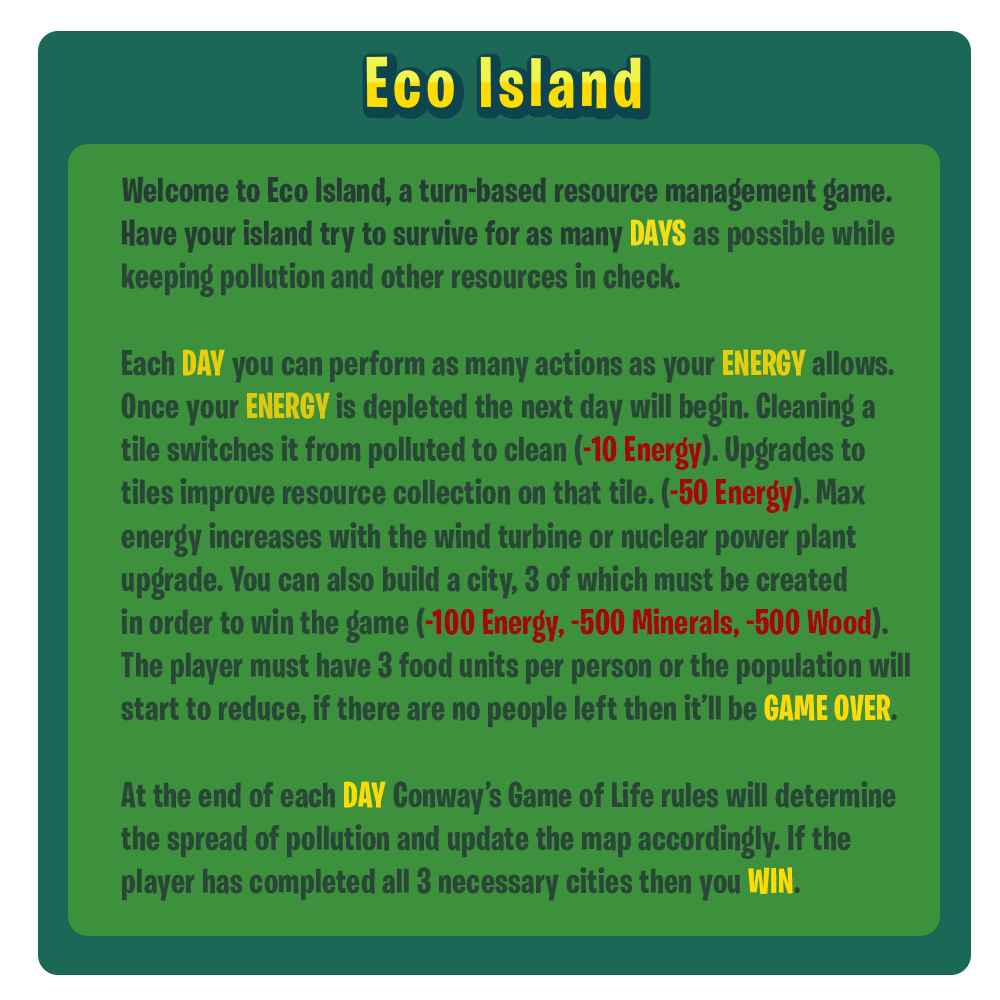
<style>
.page{position:relative;width:1000px;height:1000px;background:#3d913d}
.page>*{position:absolute;margin:0}
.t1{font:36px "BurbankBigCondensed-Bold";letter-spacing:0.01em;color:#2a4637}
.t2{font:36px "BurbankBigCondensed-Bold";letter-spacing:0.01em;color:#283c36}
.t3{font:36px "BurbankBigCondensed-Bold";letter-spacing:0.01em;color:#f4de17}
.t4{font:36px "BurbankBigCondensed-Bold";letter-spacing:0.01em;color:#e9cf0a}
.t5{font:36px "BurbankBigCondensed-Bold";letter-spacing:0.01em;color:#e7ce0a}
.t6{font:36px "BurbankBigCondensed-Bold";letter-spacing:0.01em;color:#dfc90d}
.t7{font:36px "BurbankBigCondensed-Bold";letter-spacing:0.01em;color:#9e0b0f}
.t8{font:36px "BurbankBigCondensed-Bold";letter-spacing:0.01em;color:#fddc03}
</style>
<div class="page">
<p class="t1" style="left:121px;top:176px;width:789px;height:725px"><span class="t2">Welcome to Eco Island, a turn-based resource management game.<br>Have your island try to survive for as many </span><span class="t3">DAYS </span>as possible while<br>keeping pollution and other resources in check.<br><br>Each <span class="t4">DAY </span>you can perform as many actions as your <span class="t5">ENERGY</span> allows. <br>Once your <span class="t6">ENERGY</span> is depleted the next day will begin. Cleaning a <br>tile switches it from polluted to clean (<span class="t7">-10 Energy</span>). Upgrades to  <br>tiles improve resource collection on that tile. (<span class="t7">-50 Energy</span>). Max <br>energy increases with the wind turbine or nuclear power plant<br>upgrade. You can also build a city, 3 of which must be created<br>in order to win the game (<span class="t7">-100 Energy, -500 Minerals, -500 Wood</span>).<br>The player must have 3 food units per person or the population will<br>start to reduce, if there are no people left then it’ll be <span class="t8">GAME OVER</span>.<br><br>At the end of each <span class="t8">DAY</span> Conway’s Game of Life rules will determine <br>the spread of pollution and update the map accordingly. If the <br>player has completed all 3 necessary cities then you <span class="t8">WIN</span>.</p>
</div>
